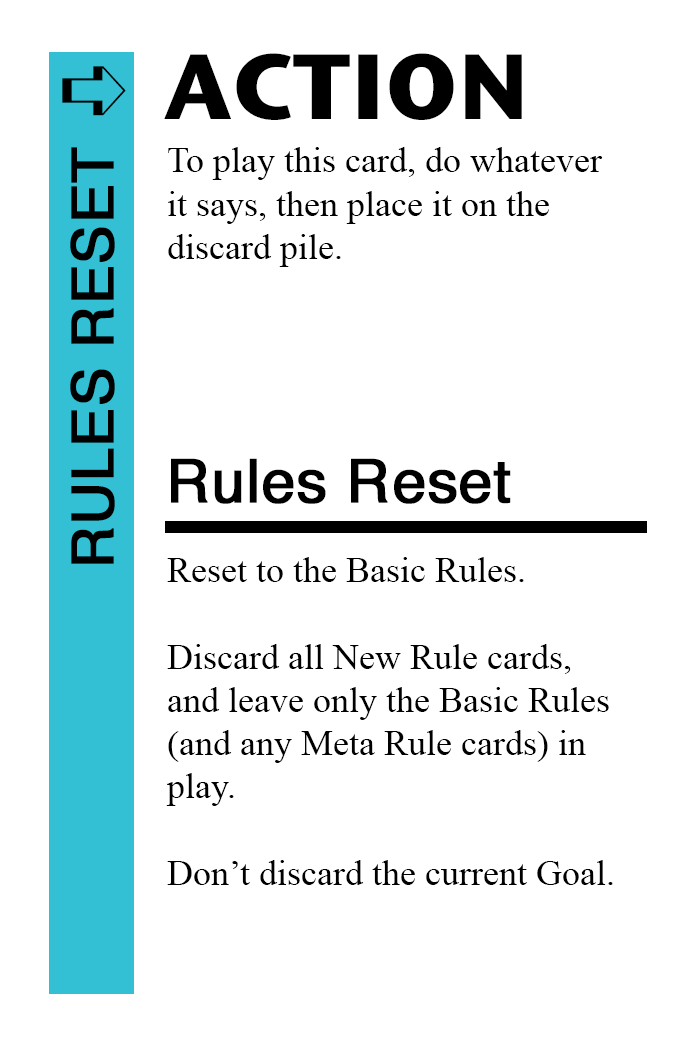
<style>
.page{position:relative;width:700px;height:1042px;background:#ffffff}
.page>*{position:absolute;margin:0}
.t1{font:92px "StoneSansITC-Bold";color:#000000}
.t2{font:82px "MS-Gothic";color:#000000}
.t3{font:58px "Helvetica";color:#000000;font-weight:bold}
.t4{font:36px "TimesNewRomanPSMT";color:#000000}
.t5{font:60px "Helvetica";color:#000000;font-weight:bold}
</style>
<div class="page">
<p class="t1" style="left:164px;top:53px;width:358px;height:67px">ACTION</p>
<p class="t2" style="left:62px;top:66px;width:64px;height:50px">➪</p>
<p class="t3" style="left:70px;top:147px;width:45px;height:417px;rotate:-90deg">RULES RESET</p>
<p class="t4" style="left:168px;top:147px;width:435px;height:120px">To play this card, do whatever<br>it says, then place it on the<br>discard pile.</p>
<p class="t5" style="left:171px;top:458px;width:340px;height:46px">Rules Reset</p>
<p class="t4" style="left:166px;top:557px;width:447px;height:328px">Reset to the Basic Rules.<br><br>Discard all New Rule cards,<br>and leave only the Basic Rules<br>(and any Meta Rule cards) in<br>play.<br><br>Don’t discard the current Goal.</p>
</div>
